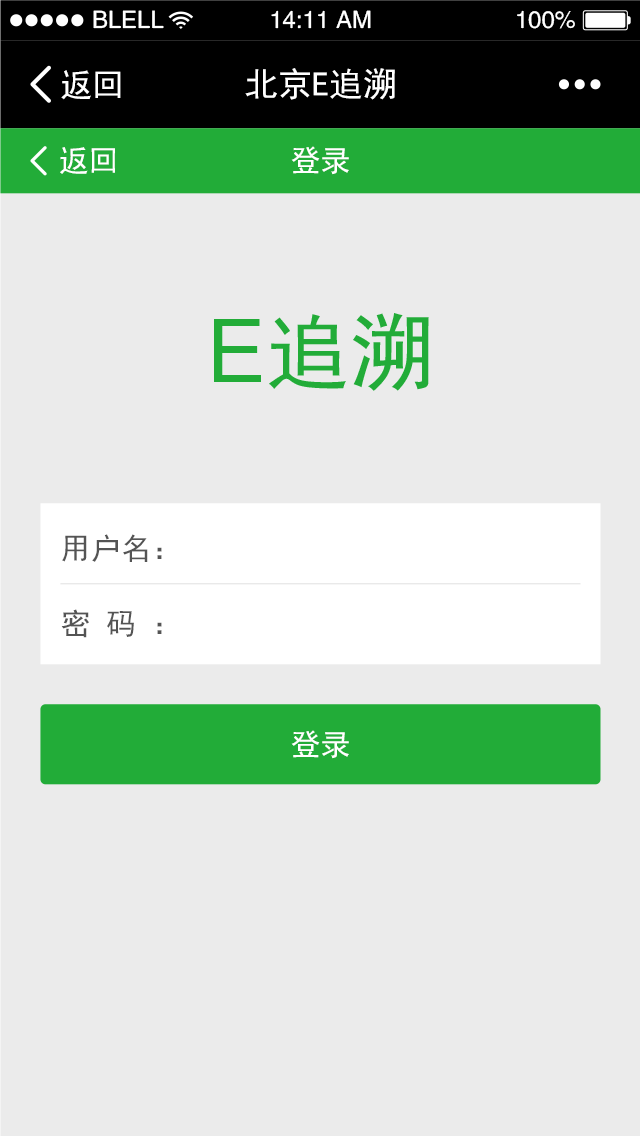
<style>
.page{position:relative;width:640px;height:1136px;background:#ebebeb}
.page>*{position:absolute;margin:0}
.t1{font:24px "FZHTJW--GB1-0";color:#ffffff}
.t2{font:32px "SimHei";color:#ffffff}
.t3{font:34px "SimHei";color:#ffffff}
.t4{font:30px "SimHei";color:#ffffff}
.t5{font:30px/75px "SimHei";color:#545454}
</style>
<div class="page">
<p class="t1" style="left:93px;top:10px;width:71px;height:19px">BLELL</p>
<p class="t1" style="left:271px;top:10px;width:100px;height:19px">14:11 AM</p>
<p class="t1" style="left:517px;top:10px;width:58px;height:19px">100%</p>
<p class="t2" style="left:61px;top:70px;width:60px;height:30px">返回</p>
<p class="t3" style="left:245px;top:68px;width:150px;height:32px">北京E追溯</p>
<p class="t4" style="left:60px;top:147px;width:55px;height:27px">返回</p>
<p class="t4" style="left:291px;top:146px;width:58px;height:29px">登录</p>
<p class="t5" style="left:61px;top:534px;width:101px;height:104px;text-align:justify">用户名：<br>密码：</p>
<p class="t4" style="left:291px;top:730px;width:58px;height:29px">登录</p>
</div>
